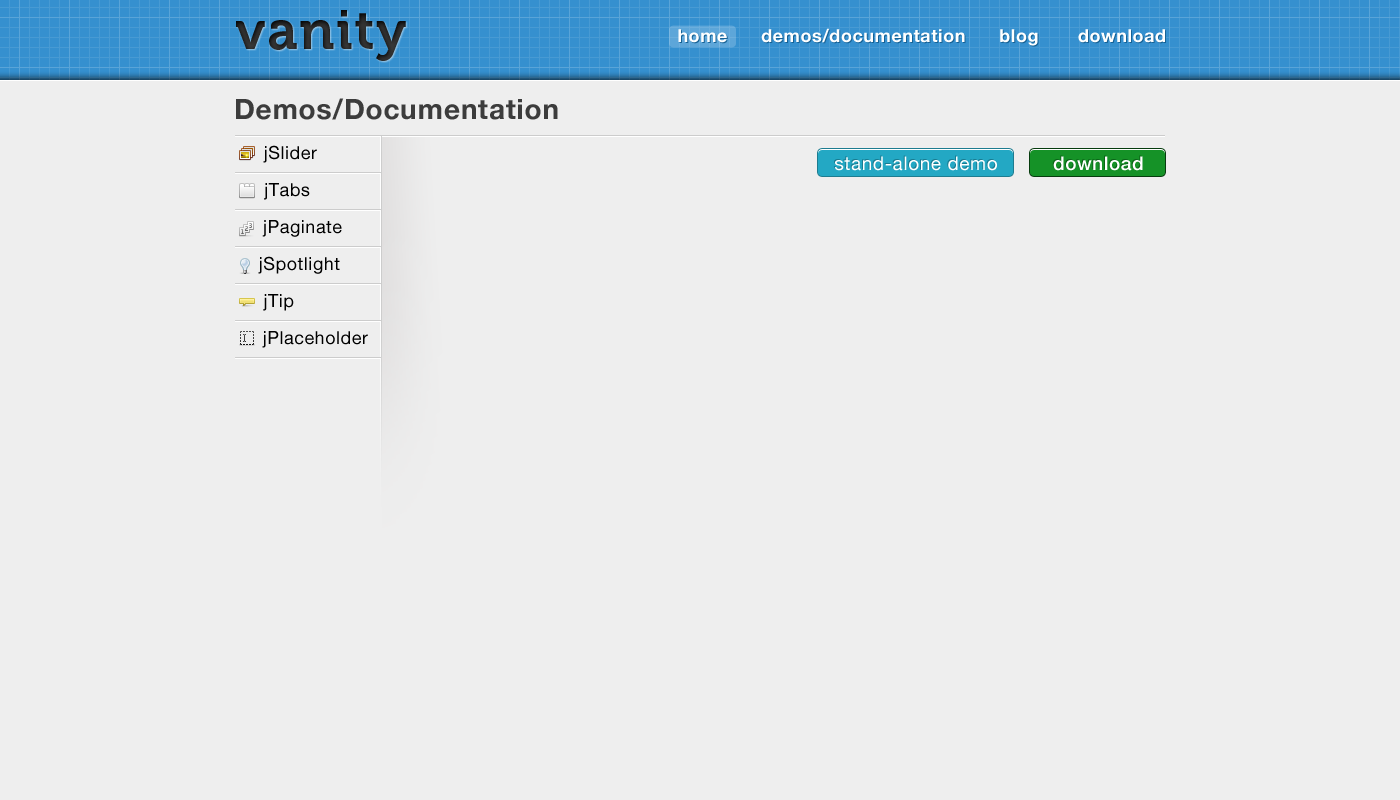
<style>
.page{position:relative;width:1400px;height:800px;background:#eeeeee}
.page>*{position:absolute;margin:0}
.t1{font:55px "Museo700-Regular";letter-spacing:0.03em;color:#292929}
.t2{font:18px "HelveticaNeue-Bold";letter-spacing:0.03em;color:#ffffff}
.t3{font:28px "HelveticaNeue-Bold";letter-spacing:0.03em;color:#3c3c3c}
.t4{font:18px "HelveticaNeue";letter-spacing:0.03em;color:#000000}
.t5{font:19px "HelveticaNeue";letter-spacing:0.03em;color:#ffffff}
.t6{font:19px "HelveticaNeue-Medium";letter-spacing:0.03em;color:#ffffff}
</style>
<div class="page">
<p class="t1" style="left:236px;top:10px;width:170px;height:51px">vanity</p>
<p class="t2" style="left:678px;top:28px;width:487px;height:18px">home      demos/documentation      blog       download</p>
<p class="t3" style="left:236px;top:98px;width:322px;height:22px">Demos/Documentation</p>
<p class="t4" style="left:263px;top:145px;width:54px;height:18px">jSlider</p>
<p class="t5" style="left:835px;top:156px;width:162px;height:15px">stand-alone demo</p>
<p class="t6" style="left:1053px;top:156px;width:90px;height:15px">download</p>
<p class="t4" style="left:264px;top:183px;width:46px;height:17px">jTabs</p>
<p class="t4" style="left:262px;top:220px;width:80px;height:17px">jPaginate</p>
<p class="t4" style="left:258px;top:256px;width:82px;height:18px">jSpotlight</p>
<p class="t4" style="left:263px;top:294px;width:31px;height:17px">jTip</p>
<p class="t4" style="left:262px;top:331px;width:106px;height:17px">jPlaceholder</p>
</div>
